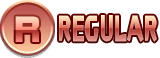
<style>
.page{position:relative;width:160px;height:58px;background:#ffffff}
.page>*{position:absolute;margin:0}
.t1{font:40px "DFSoGeiStd-W9";letter-spacing:0.05em;scale:0.9 1}
.t2{font:32px "KurokaneStd-EB";scale:0.57 1}
</style>
<div class="page">
<p class="t1" style="left:15px;top:16px;width:24px;height:26px">R</p>
<p class="t2" style="left:59px;top:15px;width:98px;height:27px">REGULAR</p>
</div>
